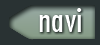
<style>
.page{position:relative;width:100px;height:45px;background:#293233}
.page>*{position:absolute;margin:0}
.t1{font:33px "Futura-CondensedMedium";color:#feffff}
</style>
<div class="page">
<p class="t1" style="left:39px;top:8px;width:43px;height:24px">navi</p>
</div>
